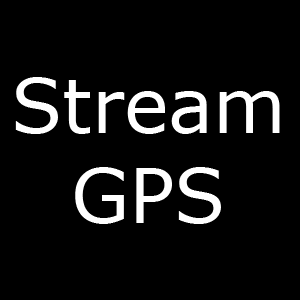
<style>
.page{position:relative;width:300px;height:300px;background:#000000}
.page>*{position:absolute;margin:0}
.t1{font:75px "Verdana";color:#ffffff}
</style>
<div class="page">
<p class="t1" style="left:15px;top:77px;width:265px;height:147px;text-align:center">Stream<br>GPS</p>
</div>
